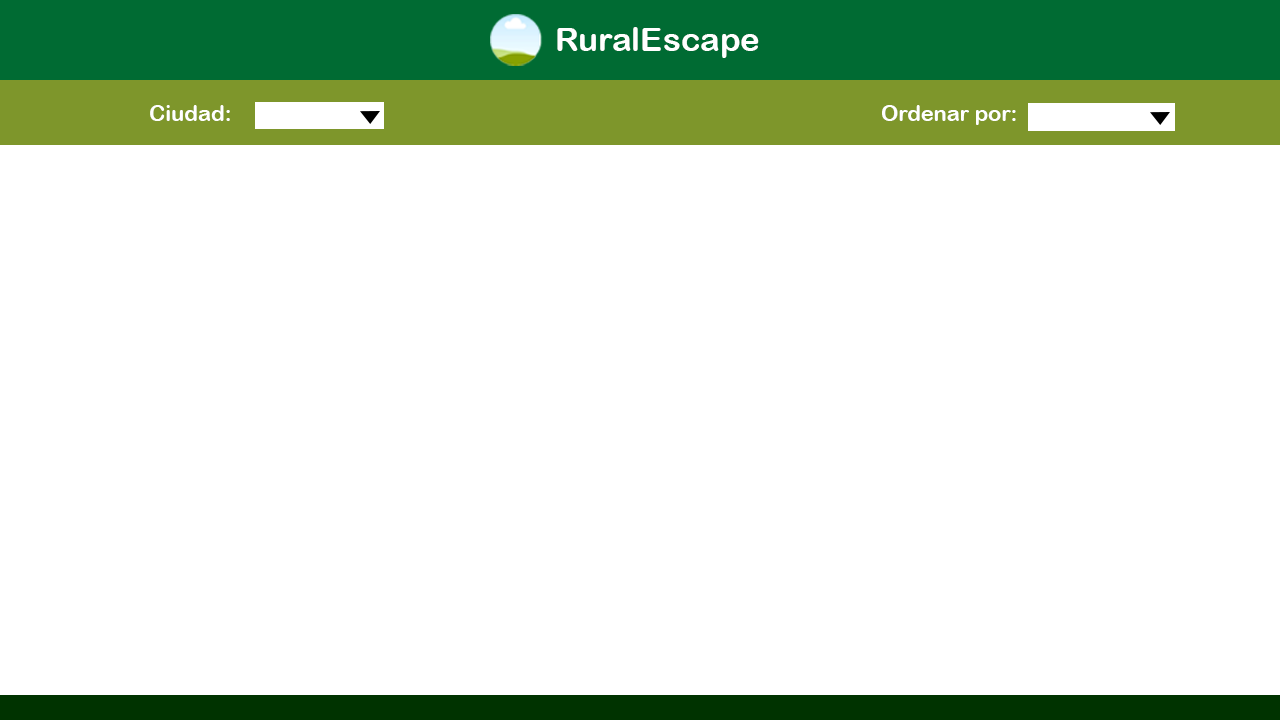
<style>
.page{position:relative;width:1280px;height:720px;background:#ffffff}
.page>*{position:absolute;margin:0}
.t1{font:33.4px "ArialRoundedMTBold";color:#ffffff}
.t2{font:21.8px "ArialRoundedMTBold";color:#ffffff}
.t3{font:22.2px "ArialRoundedMTBold";color:#ffffff}
</style>
<div class="page">
<p class="t1" style="left:557px;top:27px;width:202px;height:31px">RuralEscape</p>
<p class="t2" style="left:150px;top:105px;width:80px;height:16px">Ciudad:</p>
<p class="t3" style="left:882px;top:105px;width:134px;height:20px">Ordenar por:</p>
</div>
